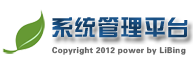
<style>
.page{position:relative;width:193px;height:64px;background:#ffffff}
.page>*{position:absolute;margin:0}
.t1{font:22px "FZZYJW--GB1-0";letter-spacing:0.05em;color:#184b7b}
.t2{font:8px "FZZYJW--GB1-0";letter-spacing:0.05em;color:#616161}
</style>
<div class="page">
<p class="t1" style="left:52px;top:17px;width:136px;height:21px">系统管理平台</p>
<p class="t2" style="left:52px;top:46px;width:134px;height:9px">Copyright 2012 power by LiBing</p>
</div>
